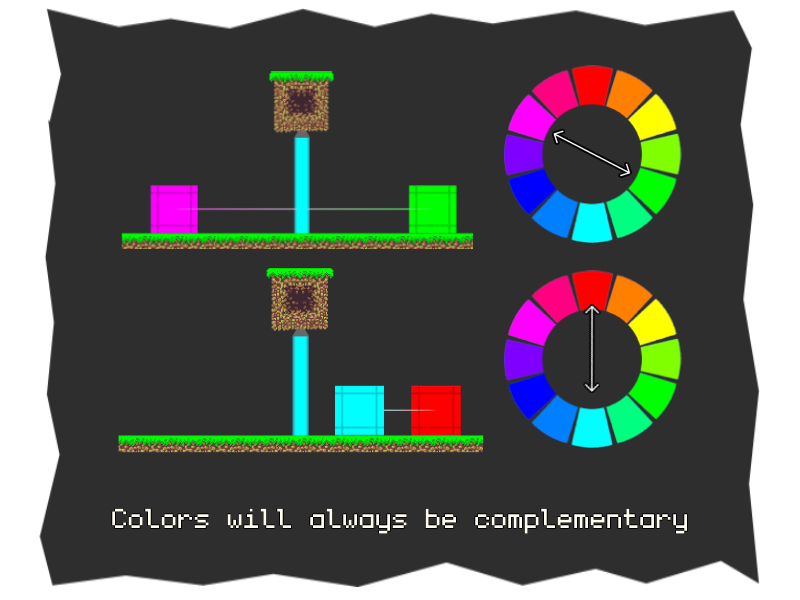
<style>
.page{position:relative;width:800px;height:600px;background:#2e2e2e}
.page>*{position:absolute;margin:0}
.t1{font:44px "monogram";color:#fefcef}
</style>
<div class="page">
<p class="t1" style="left:112px;top:508px;width:576px;height:26px">Colors will always be complementary</p>
</div>
